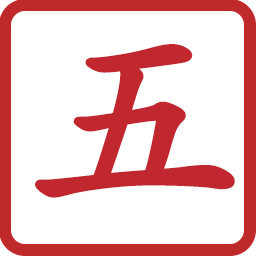
<style>
.page{position:relative;width:256px;height:256px;background:#ffffff}
.page>*{position:absolute;margin:0}
.t1{font:216.7px "STKaiti";color:#c1272f;font-weight:bold}
</style>
<div class="page">
<p class="t1" style="left:35px;top:44px;width:200px;height:154px">五</p>
</div>
